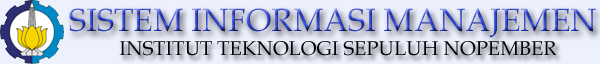
<style>
.page{position:relative;width:600px;height:64px;background:#edf1fe}
.page>*{position:absolute;margin:0}
.t1{font:32px "BookAntiqua"}
.t2{font:20px "BookAntiqua";color:#000000}
</style>
<div class="page">
<p class="t1" style="left:69px;top:8px;width:527px;height:30px">SISTEM INFORMASI MANAJEMEN</p>
<p class="t2" style="left:119px;top:41px;width:438px;height:15px">INSTITUT TEKNOLOGI SEPULUH NOPEMBER</p>
</div>
